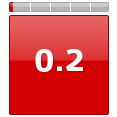
<style>
.page{position:relative;width:117px;height:117px;background:#d40000}
.page>*{position:absolute;margin:0}
.t1{font:36px "Colaborate-Bold";color:#ffffff;text-transform:uppercase}
</style>
<div class="page">
<p class="t1" style="left:35px;top:49px;width:48px;height:23px">0.2</p>
</div>
